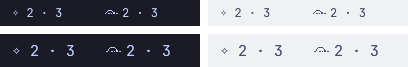
<style>
.page{position:relative;width:408px;height:67px;background:#eff1f5}
.page>*{position:absolute;margin:0}
.t1{font:12px "Adwaita-Mono"}
.t2{font:12px "JetBrainsMonoNF-Regular";color:#c0caf5}
.t3{font:12px "JetBrainsMonoNF-Regular";color:#4c4f69}
.t4{font:15px "Adwaita-Mono";color:#c0caf5}
.t5{font:15px "JetBrainsMonoNF-Regular";color:#c0caf5}
.t6{font:15px "Adwaita-Mono";color:#4c4f69}
.t7{font:15px "JetBrainsMonoNF-Regular";color:#4c4f69}
</style>
<div class="page">
<p class="t1" style="left:13px;top:10px;width:5px;height:6px">⟡</p>
<p class="t2" style="left:27px;top:8px;width:35px;height:10px">2 · 3</p>
<p class="t2" style="left:123px;top:8px;width:34px;height:10px">2 · 3</p>
<p class="t1" style="left:221px;top:10px;width:5px;height:6px">⟡</p>
<p class="t3" style="left:235px;top:8px;width:35px;height:10px">2 · 3</p>
<p class="t3" style="left:331px;top:8px;width:34px;height:10px">2 · 3</p>
<p class="t4" style="left:13px;top:47px;width:7px;height:8px">⟡</p>
<p class="t5" style="left:31px;top:45px;width:43px;height:12px">2 · 3</p>
<p class="t5" style="left:127px;top:45px;width:43px;height:12px">2 · 3</p>
<p class="t6" style="left:221px;top:47px;width:7px;height:8px">⟡</p>
<p class="t7" style="left:239px;top:45px;width:43px;height:12px">2 · 3</p>
<p class="t7" style="left:335px;top:45px;width:43px;height:12px">2 · 3</p>
</div>
